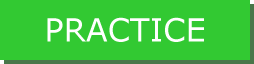
<style>
.page{position:relative;width:254px;height:64px;background:#32c932}
.page>*{position:absolute;margin:0}
.t1{font:32px "Verdana";color:#ffffff}
</style>
<div class="page">
<p class="t1" style="left:47px;top:17px;width:157px;height:25px">PRACTICE</p>
</div>
